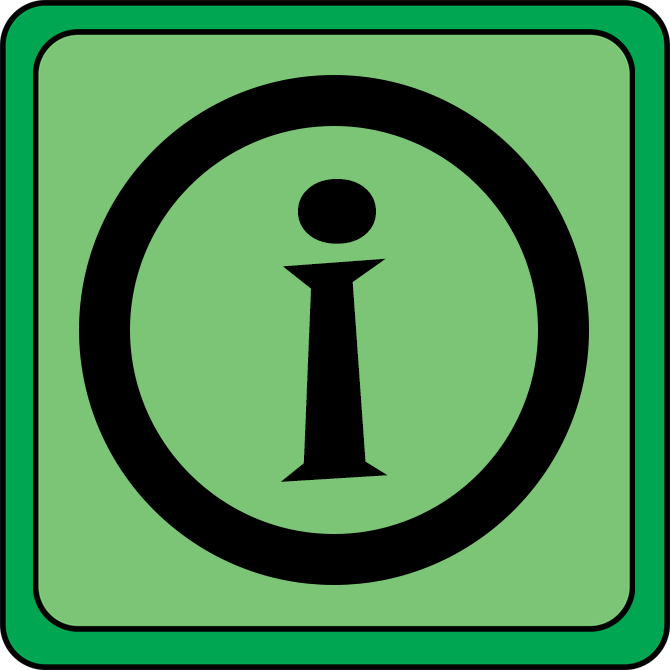
<style>
.page{position:relative;width:670px;height:670px;background:#7cc576}
.page>*{position:absolute;margin:0}
.t1{font:420.1px "SnapITC-Regular";color:#000000;scale:0.5 1}
</style>
<div class="page">
<p class="t1" style="left:281px;top:179px;width:107px;height:303px">i</p>
</div>
